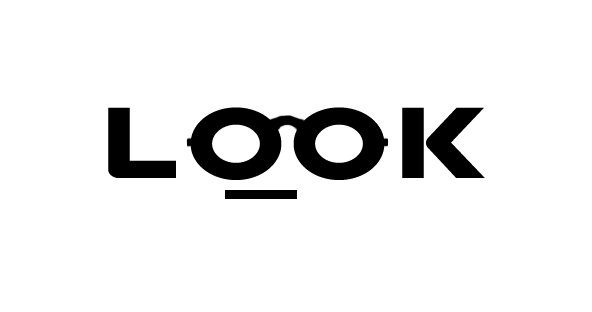
<style>
.page{position:relative;width:592px;height:312px;background:#ffffff}
.page>*{position:absolute;margin:0}
.t1{font:101.2px "HavelockTitling-Black";letter-spacing:-0.22em;color:#000000;scale:1.25 1}
</style>
<div class="page">
<p class="t1" style="left:108px;top:107px;width:68px;height:71px">l</p>
<p class="t1" style="left:190px;top:107px;width:92px;height:73px">o</p>
<p class="t1" style="left:293px;top:107px;width:92px;height:73px">o</p>
<p class="t1" style="left:402px;top:107px;width:83px;height:71px">k</p>
</div>
